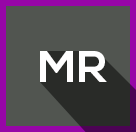
<style>
.page{position:relative;width:136px;height:132px;background:#515550}
.page>*{position:absolute;margin:0}
.t1{font:44px "NexaBold";color:#ffffff}
</style>
<div class="page">
<p class="t1" style="left:40px;top:51px;width:67px;height:31px">MR</p>
</div>
